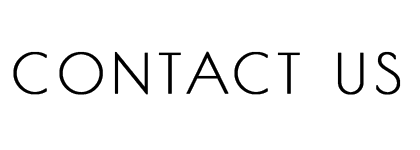
<style>
.page{position:relative;width:420px;height:150px;background:#ffffff}
.page>*{position:absolute;margin:0}
.t1{font:53.7px "PoiretOne-Regular";letter-spacing:0.12em;color:#000000;font-weight:bold}
</style>
<div class="page">
<p class="t1" style="left:13px;top:51px;width:388px;height:44px">CONTACT US</p>
</div>
